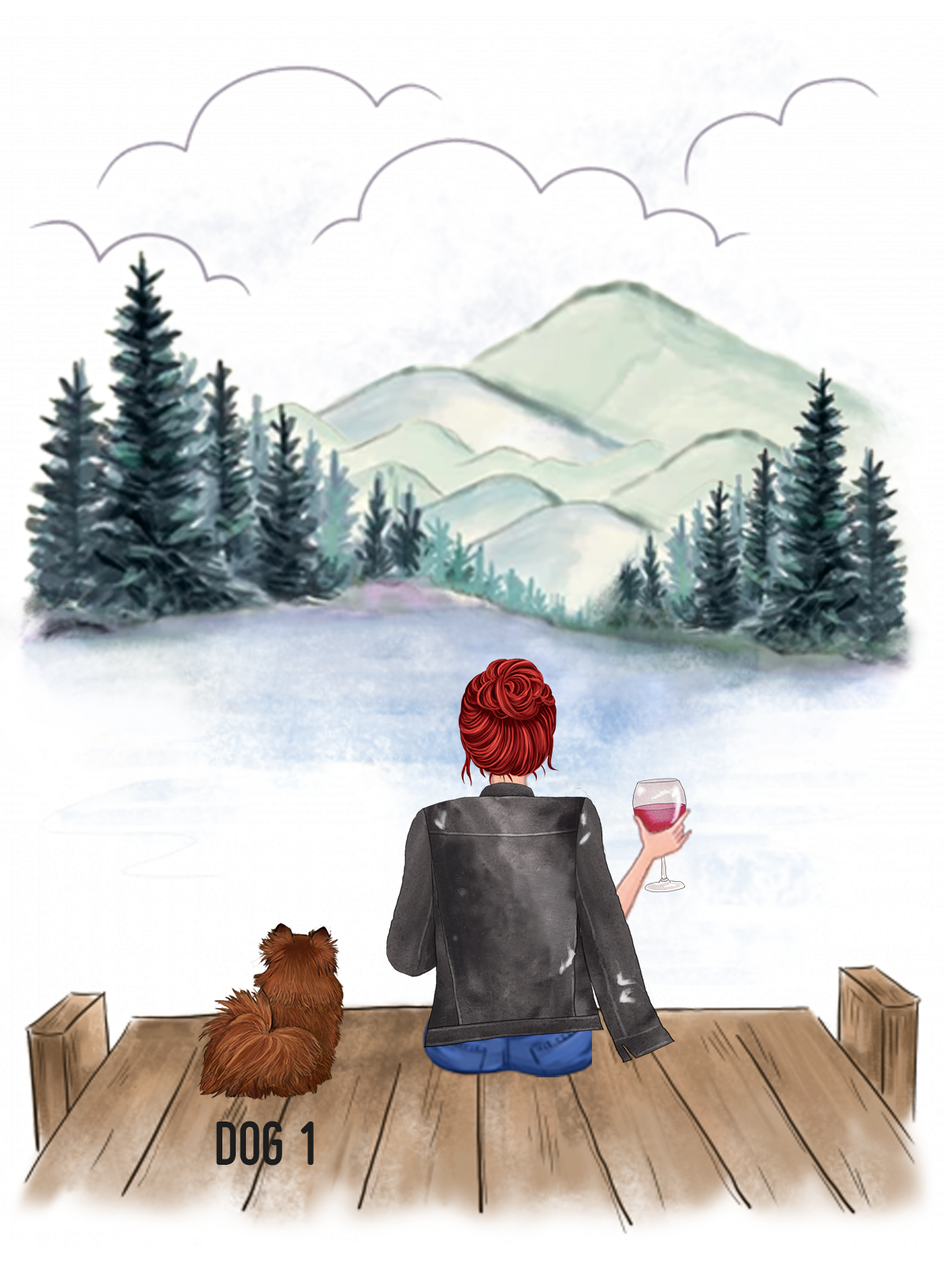
<style>
.page{position:relative;width:946px;height:1261px}
.page>*{position:absolute;margin:0}
.t1{font:49.8px "Cynzia-Bold";color:#1d1d1d}
</style>
<div class="page">
<p class="t1" style="left:216px;top:1121px;width:98px;height:45px">Dog 1</p>
</div>
